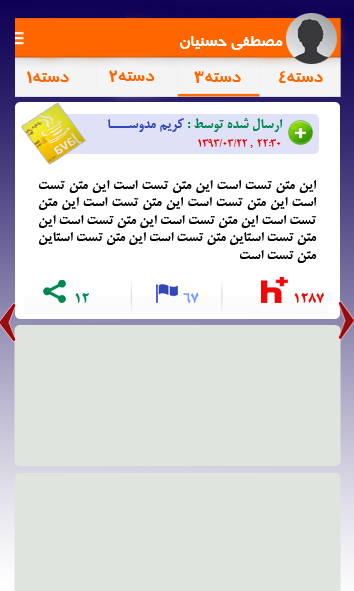
<style>
.page{position:relative;width:354px;height:591px;background:#dfe4df}
.page>*{position:absolute;margin:0}
.t1{font:16.7px "BTrafficBold";color:#ffffff}
.t2{font:16.7px "BTrafficBold";color:#ff6600}
.t3{font:14.6px "BMitraBold";color:#008853}
.t4{font:14.6px "BMitraBold";color:#3447b8}
.t5{font:10.4px "BMitraBold";color:#ef0808}
.t6{font:14.6px "BMitraBold";color:#0a0a0a}
.t7{font:14.6px "BMitraBold";color:#799cff}
.t8{font:14.6px "BMitraBold";color:#ef0808}
</style>
<div class="page">
<p class="t1" style="left:180px;top:36px;width:103px;height:14px">مصطفي حسنيان</p>
<p class="t2" style="left:27px;top:71px;width:42px;height:12px">دسته1</p>
<p class="t2" style="left:109px;top:70px;width:46px;height:12px">دسته2</p>
<p class="t2" style="left:194px;top:71px;width:47px;height:12px">دسته3</p>
<p class="t2" style="left:279px;top:71px;width:44px;height:12px">دسته4</p>
<p class="t3" style="left:108px;top:118px;width:174px;height:14px">ارسال شده توسط : <span class="t4">کريم مدوســـا</span></p>
<p class="t5" style="left:198px;top:139px;width:83px;height:9px">1393/03/22 ,  22:30</p>
<p class="t6" style="left:39px;top:180px;width:278px;height:83px;text-align:justify">اين متن تست است اين متن تست است اين متن تست است اين متن تست است اين متن تست است اين متن تست است اين متن تست است اين متن تست است اين متن تست استاين متن تست است اين متن تست استاين متن تست است</p>
<p class="t3" style="left:75px;top:293px;width:14px;height:10px">12</p>
<p class="t7" style="left:183px;top:292px;width:16px;height:11px">67</p>
<p class="t8" style="left:294px;top:292px;width:30px;height:11px">1287</p>
</div>
